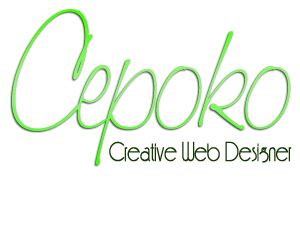
<style>
.page{position:relative;width:300px;height:225px;background:#ffffff}
.page>*{position:absolute;margin:0}
.t1{font:119.3px "SaginawLight";scale:0.85 1}
.t2{font:25.5px "FeenaCasual";color:#163704;scale:0.88 1}
</style>
<div class="page">
<p class="t1" style="left:12px;top:9px;width:279px;height:156px">Cepoko</p>
<p class="t2" style="left:109px;top:141px;width:183px;height:22px">Creative Web Designer</p>
</div>
